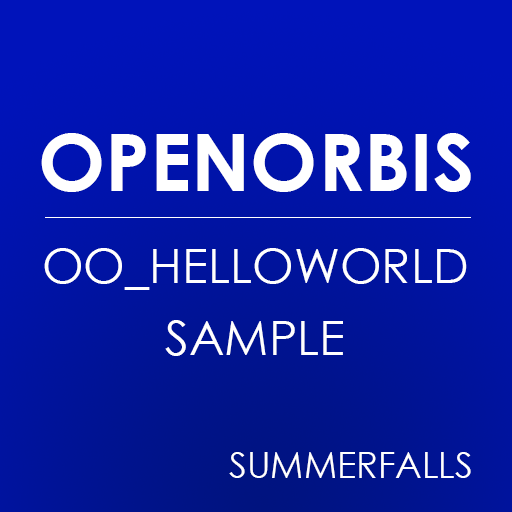
<style>
.page{position:relative;width:512px;height:512px}
.page>*{position:absolute;margin:0}
.t1{font:80px "CenturyGothic-Bold";color:#ffffff;text-transform:uppercase}
.t2{font:48px/72px "CenturyGothic";color:#ffffff;text-transform:uppercase}
.t3{font:36px "CenturyGothic";color:#ffffff;text-transform:uppercase}
</style>
<div class="page">
<p class="t1" style="left:41px;top:133px;width:430px;height:59px">OpenOrbis</p>
<p class="t2" style="left:44px;top:248px;width:423px;height:108px;text-align:center">OO_HelloWorld<br>Sample</p>
<p class="t3" style="left:229px;top:452px;width:242px;height:26px">SummerFalls</p>
</div>
